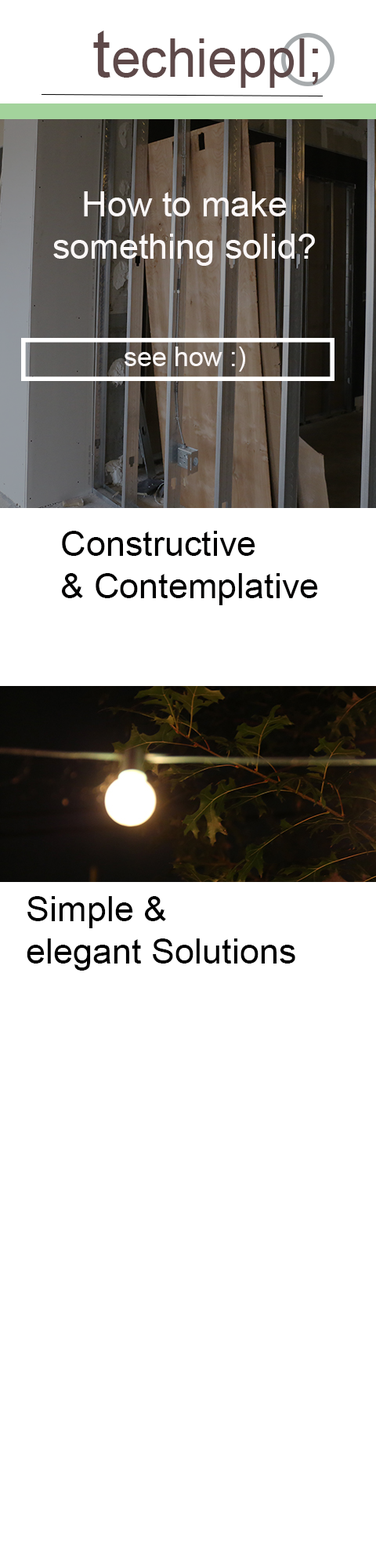
<style>
.page{position:relative;width:376px;height:1568px;background:#ffffff}
.page>*{position:absolute;margin:0}
.t1{font:52.9px "ArialMT";color:#5e4949}
.t2{font:66.2px "ArialMT";color:#5e4949}
.t3{font:35.3px "ArialMT";color:#fbf7f7}
.t4{font:26.5px "ArialMT";color:#fbf7f7}
.t5{font:35.3px "ArialMT";color:#010000}
.t6{font:35.3px "ArialMT";color:#000000}
</style>
<div class="page">
<p class="t1" style="left:93px;top:31px;width:225px;height:57px"><span class="t2">t</span>echieppl;</p>
<p class="t3" style="left:53px;top:191px;width:262px;height:75px;text-align:center">How to make <br>something solid?</p>
<p class="t4" style="left:125px;top:347px;width:120px;height:25px">see how :)</p>
<p class="t5" style="left:62px;top:531px;width:256px;height:74px">Constructive <br>&amp; Contemplative</p>
<p class="t6" style="left:27px;top:896px;width:269px;height:75px">Simple &amp; <br>elegant Solutions</p>
</div>
